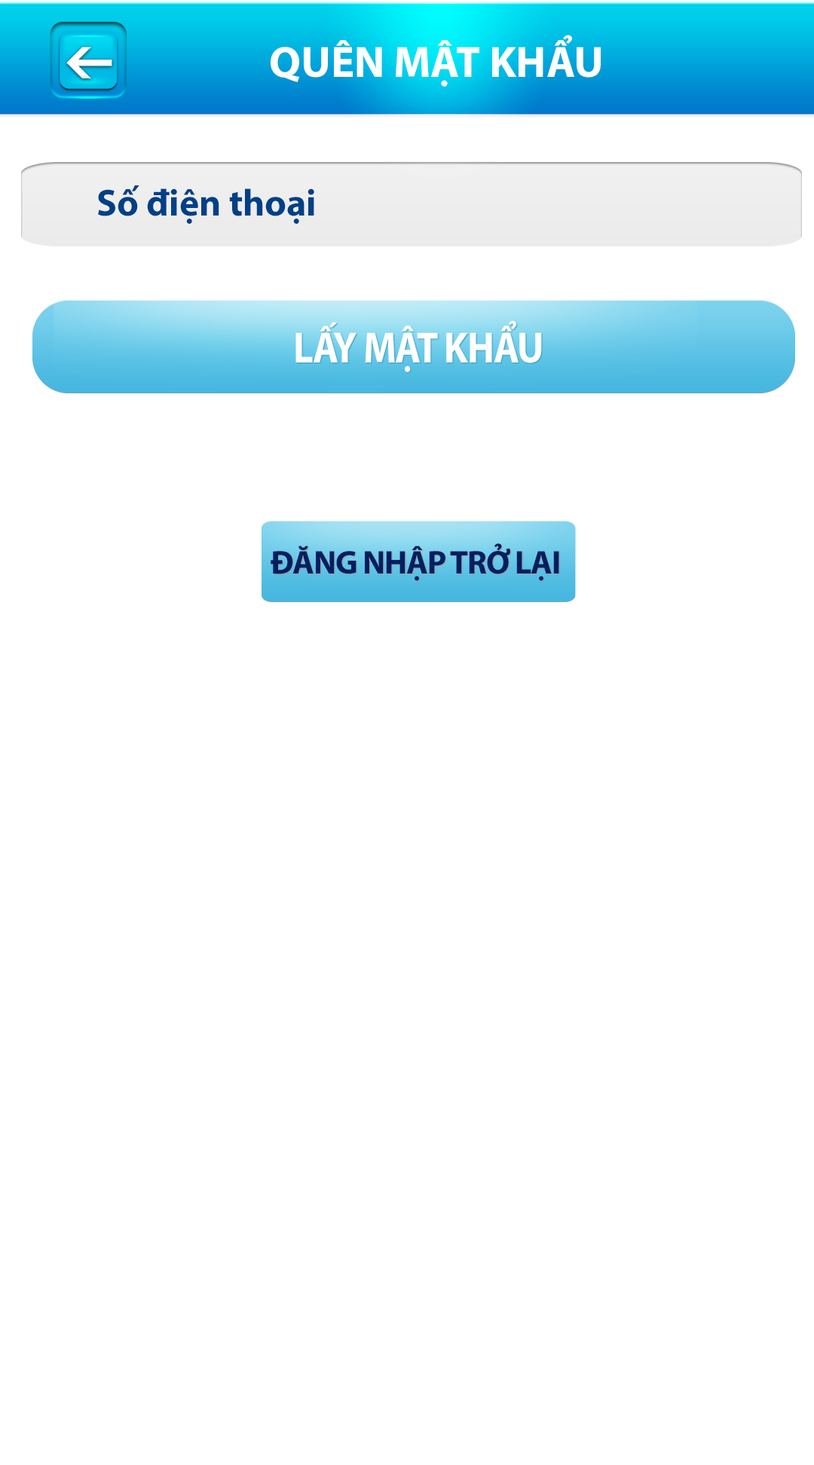
<style>
.page{position:relative;width:814px;height:1465px;background:#ffffff}
.page>*{position:absolute;margin:0}
.t1{font:44px "MyriadPro-Bold";color:#ffffff}
.t2{font:37.7px "MyriadPro-Bold";color:#004086}
.t3{font:44px "MyriadPro-Bold";letter-spacing:-0.025em;color:#ffffff;scale:0.89 1}
.t4{font:33px "MyriadPro-Bold";letter-spacing:-0.025em;color:#011f61}
</style>
<div class="page">
<p class="t1" style="left:271px;top:35px;width:330px;height:52px">QUÊN MẬT KHẨU</p>
<p class="t2" style="left:98px;top:185px;width:216px;height:39px">Số điện thoại</p>
<p class="t3" style="left:295px;top:320px;width:247px;height:52px">LẤY MẬT KHẨU</p>
<p class="t4" style="left:271px;top:543px;width:288px;height:38px">ĐĂNG NHẬP TRỞ LẠI</p>
</div>
